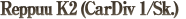
<style>
.page{position:relative;width:186px;height:19px;background:#ffffff}
.page>*{position:absolute;margin:0}
.t1{font:18px "RyuminPro-ExBold";letter-spacing:-0.08em;color:#4a3f32;font-weight:bold;scale:0.9 1}
</style>
<div class="page">
<p class="t1" style="left:0px;top:1px;width:179px;height:18px">Reppuu K2 (CarDiv 1/Sk.)</p>
</div>
